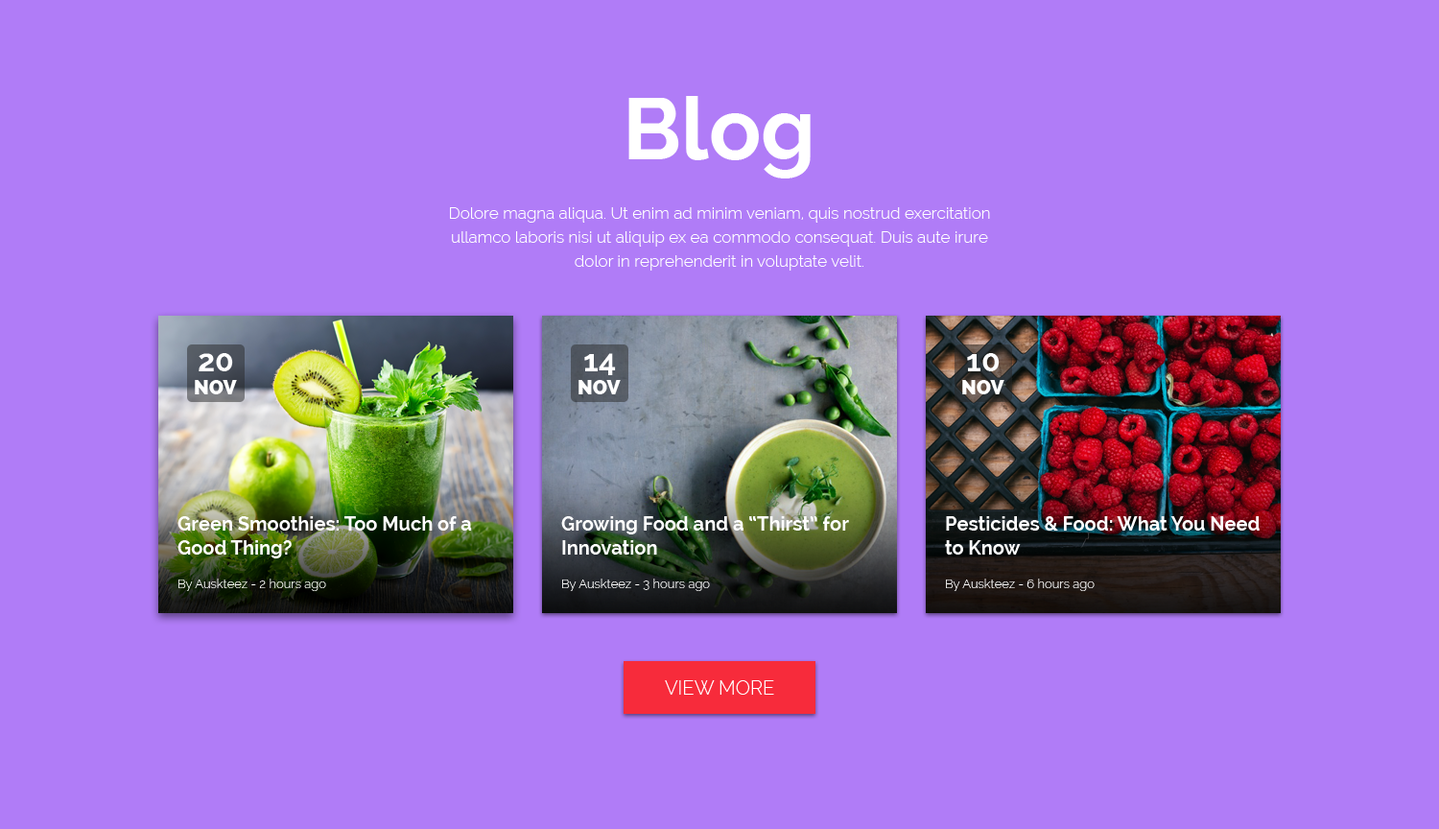
<style>
.page{position:relative;width:1439px;height:829px;background:#b07cf7}
.page>*{position:absolute;margin:0}
.t1{font:86.3px "Raleway-Bold";color:#ffffff}
.t2{font:16.3px/24px "Raleway-Light";color:#ffffff}
.t3{font:30.7px "Raleway-Bold";color:#ffffff}
.t4{font:20.1px "Raleway-Heavy";color:#ffffff}
.t5{font:19.2px/24px "Raleway-Bold";color:#ffffff}
.t6{font:12.5px/24px "Raleway-Light";color:#ffffff}
.t7{font:19.2px "Raleway-Light";color:#ffffff}
</style>
<div class="page">
<p class="t1" style="left:628px;top:96px;width:183px;height:82px">Blog</p>
<p class="t2" style="left:450px;top:207px;width:540px;height:63px;text-align:center">Dolore magna aliqua. Ut enim ad minim veniam, quis nostrud exercitation ullamco laboris nisi ut aliquip ex ea commodo consequat. Duis aute irure dolor in reprehenderit in voluptate velit.</p>
<p class="t3" style="left:199px;top:353px;width:34px;height:18px">20</p>
<p class="t3" style="left:584px;top:353px;width:32px;height:22px">14</p>
<p class="t3" style="left:967px;top:353px;width:32px;height:18px">10</p>
<p class="t4" style="left:195px;top:380px;width:42px;height:14px">NOV</p>
<p class="t4" style="left:578px;top:380px;width:43px;height:14px">NOV</p>
<p class="t4" style="left:962px;top:380px;width:42px;height:14px">NOV</p>
<p class="t5" style="left:177px;top:516px;width:295px;height:75px">Green Smoothies: Too Much of a Good Thing?<br><span class="t6">By Auskteez - 2 hours ago</span></p>
<p class="t5" style="left:561px;top:516px;width:288px;height:75px">Growing Food and a “Thirst” for Innovation<br><span class="t6">By Auskteez - 3 hours ago</span></p>
<p class="t5" style="left:945px;top:516px;width:314px;height:75px">Pesticides &amp; Food: What You Need to Know<br><span class="t6">By Auskteez - 6 hours ago</span></p>
<p class="t7" style="left:665px;top:680px;width:109px;height:14px">VIEW MORE</p>
</div>
